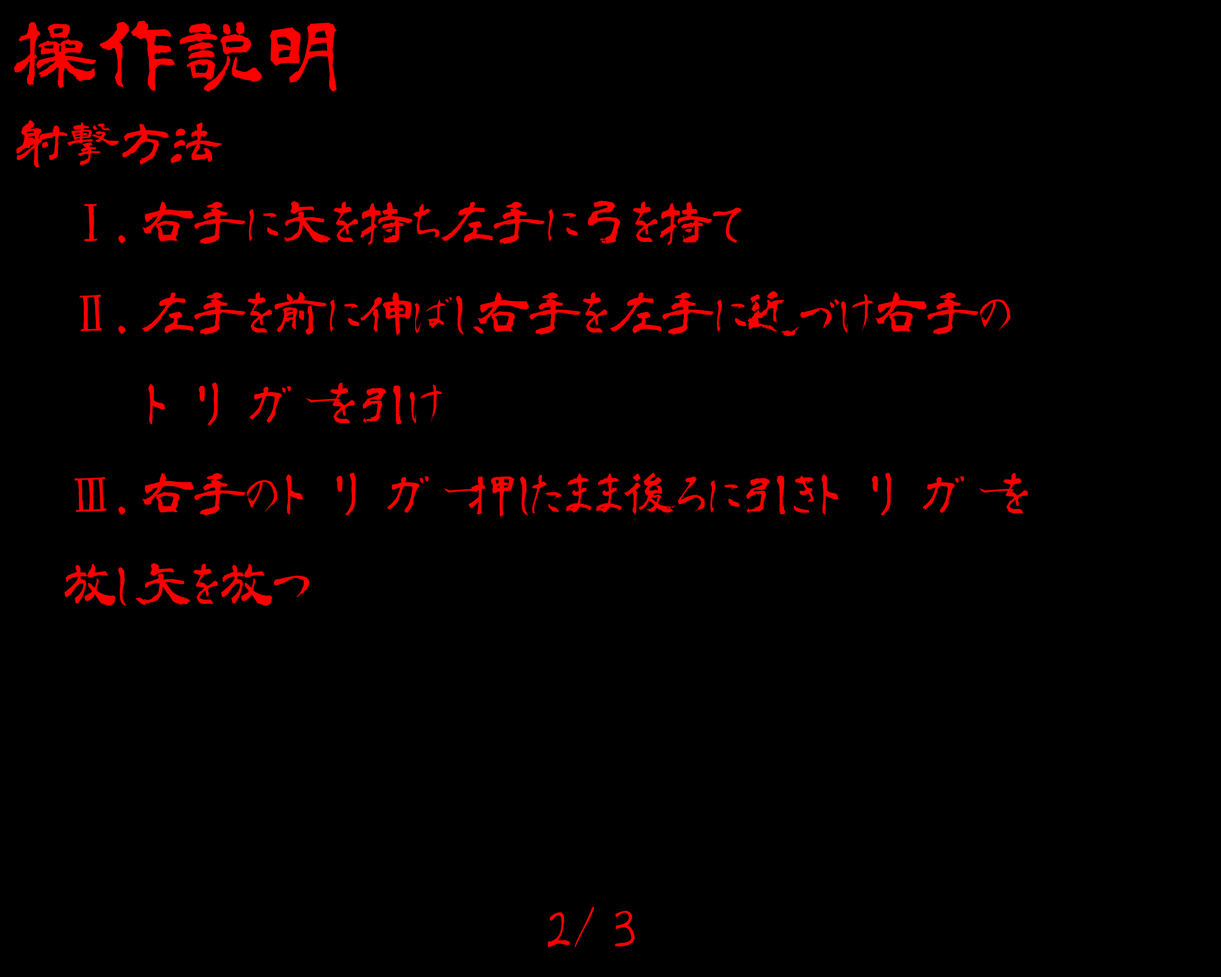
<style>
.page{position:relative;width:1221px;height:977px;background:#000000}
.page>*{position:absolute;margin:0}
.t1{font:82.7px "aoyagireisyosimo2";color:#ff0000}
.t2{font:51.7px "aoyagireisyosimo2";color:#fa0000}
.t3{font:51.7px "aoyagireisyosimo2";color:#ff0000}
</style>
<div class="page">
<p class="t1" style="left:14px;top:21px;width:323px;height:71px">操作説明</p>
<p class="t2" style="left:16px;top:120px;width:206px;height:47px">射撃方法</p>
<p class="t2" style="left:64px;top:201px;width:964px;height:405px">Ⅰ.右手に矢を持ち左手に弓を持て<br>Ⅱ.左手を前に伸ばし、右手を左手に近づけ右手の<br>   トリガーを引け<br>Ⅲ.右手のトリガー押したまま後ろに引きトリガーを<br>放し、矢を放つ</p>
<p class="t3" style="left:547px;top:906px;width:88px;height:41px">2/３</p>
</div>
